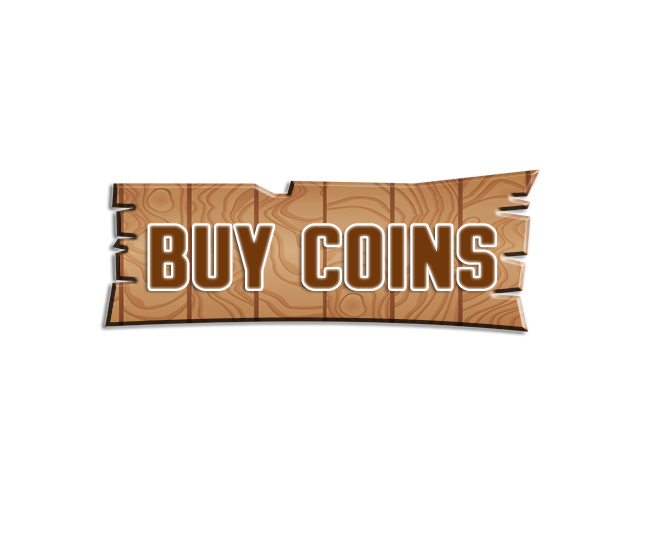
<style>
.page{position:relative;width:650px;height:536px;background:#ffffff}
.page>*{position:absolute;margin:0}
.t1{font:70px "BrewmasterGothicRound";color:#70380b;scale:1.26 1}
</style>
<div class="page">
<p class="t1" style="left:149px;top:225px;width:346px;height:64px">buy coins</p>
</div>
